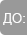
<style>
.page{position:relative;width:27px;height:35px;background:#999999}
.page>*{position:absolute;margin:0}
.t1{font:13px "ArialMT";color:#fdfdfd}
</style>
<div class="page">
<p class="t1" style="left:3px;top:13px;width:22px;height:12px">ДО:</p>
</div>
